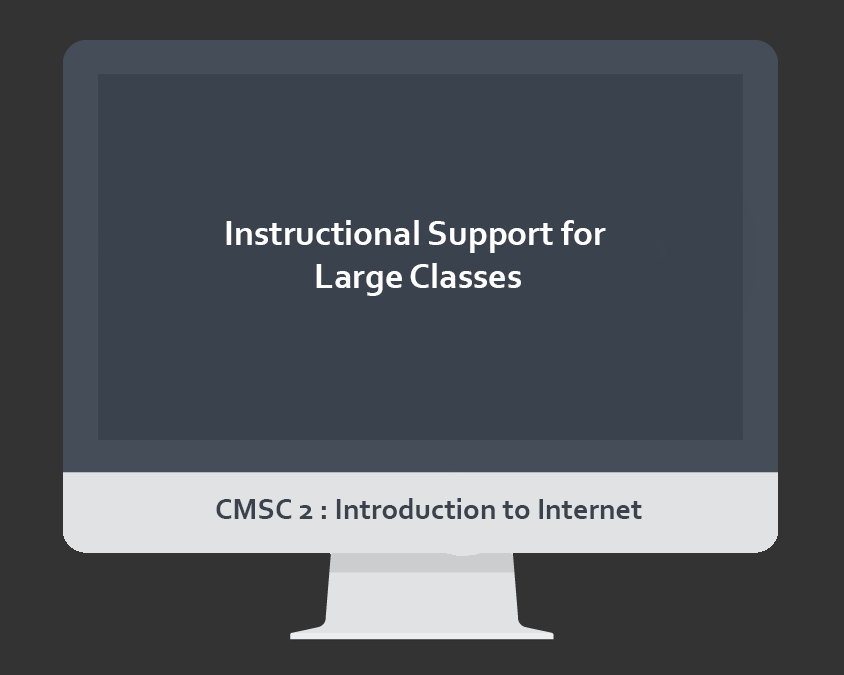
<style>
.page{position:relative;width:844px;height:675px;background:#3a424d}
.page>*{position:absolute;margin:0}
.t1{font:36px "Corbel-Bold";color:#ffffff}
.t2{font:30px "Corbel-Bold";color:#3a424d}
</style>
<div class="page">
<p class="t1" style="left:226px;top:220px;width:380px;height:76px;text-align:center">Instructional Support for <br>Large Classes</p>
<p class="t2" style="left:216px;top:498px;width:426px;height:21px">CMSC 2 : Introduction to Internet</p>
</div>
